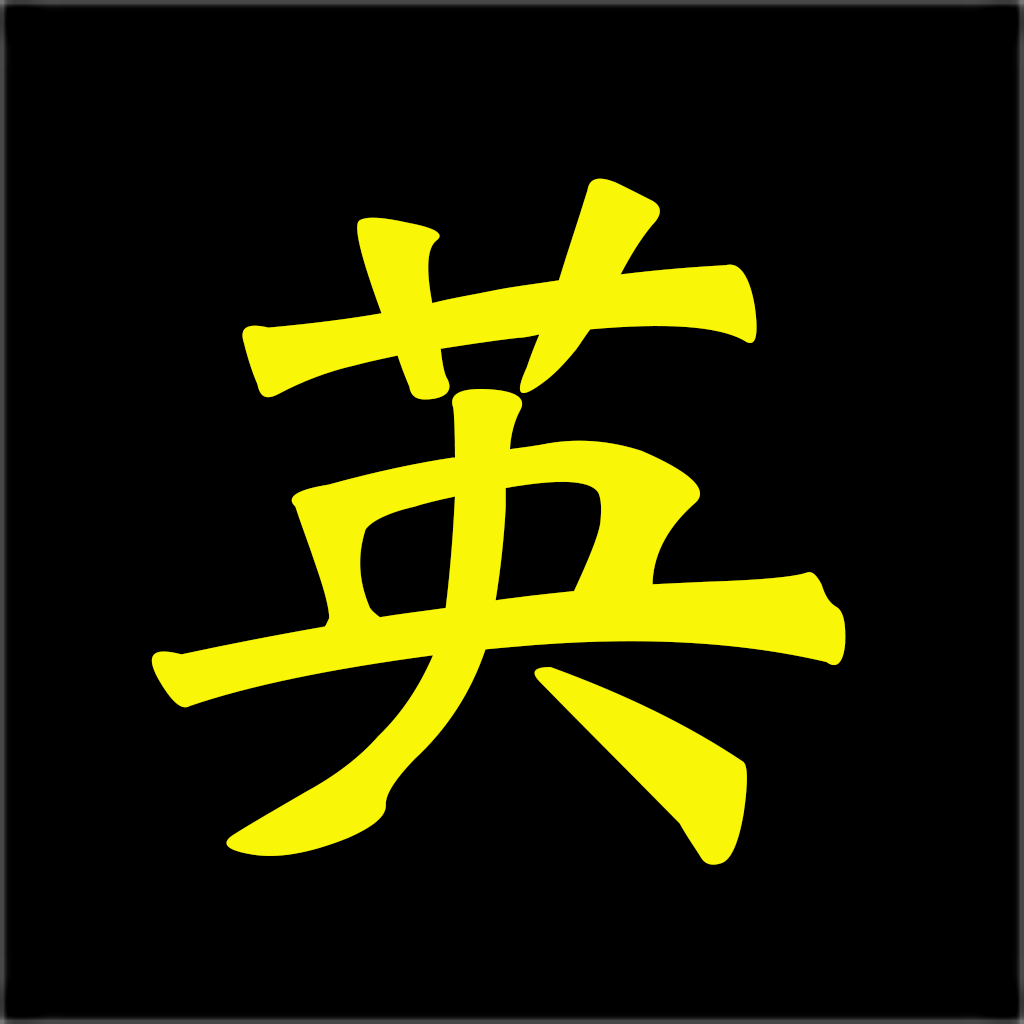
<style>
.page{position:relative;width:1024px;height:1024px;background:#000000}
.page>*{position:absolute;margin:0}
.t1{font:844.4px "Weibei-SC-Bold";color:#f9f607}
</style>
<div class="page">
<p class="t1" style="left:151px;top:178px;width:695px;height:687px">英</p>
</div>
